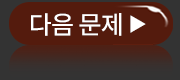
<style>
.page{position:relative;width:180px;height:80px;background:#541b0d}
.page>*{position:absolute;margin:0}
.t1{font:25px "NotoSansCJKkr-Regular";letter-spacing:-0.025em;color:#ffffff}
.t2{font:18px "NotoSansCJKkr-Regular";letter-spacing:-0.025em;color:#ffffff}
</style>
<div class="page">
<p class="t1" style="left:31px;top:13px;width:91px;height:23px">다음 문제</p>
<p class="t2" style="left:130px;top:15px;width:16px;height:18px">▶</p>
</div>
